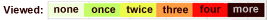
<style>
.page{position:relative;width:267px;height:20px}
.page>*{position:absolute;margin:0}
.t1{font:10.6px "Arial-BoldMT";color:#2c0101}
.t2{font:10.6px "Arial-BoldMT";color:#c3c0c0}
</style>
<div class="page">
<p class="t1" style="left:3px;top:6px;width:40px;height:8px">Viewed:</p>
<p class="t1" style="left:126px;top:5px;width:27px;height:8px">twice</p>
<p class="t1" style="left:162px;top:5px;width:26px;height:9px">three</p>
<p class="t1" style="left:200px;top:5px;width:21px;height:8px">four</p>
<p class="t2" style="left:233px;top:6px;width:26px;height:7px">more</p>
<p class="t1" style="left:54px;top:7px;width:25px;height:6px">none</p>
<p class="t1" style="left:91px;top:7px;width:25px;height:6px">once</p>
</div>
